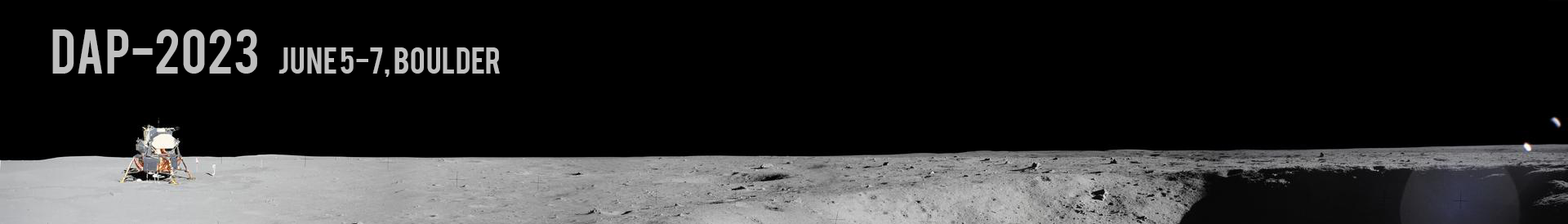
<style>
.page{position:relative;width:1568px;height:224px;background:#000000}
.page>*{position:absolute;margin:0}
.t1{font:49px "Bebas";color:#bfbfbf}
.t2{font:29.4px "Bebas";color:#bfbfbf}
</style>
<div class="page">
<p class="t1" style="left:52px;top:29px;width:205px;height:45px">DAP-2023</p>
<p class="t2" style="left:278px;top:47px;width:222px;height:30px">June 5-7, Boulder</p>
</div>
